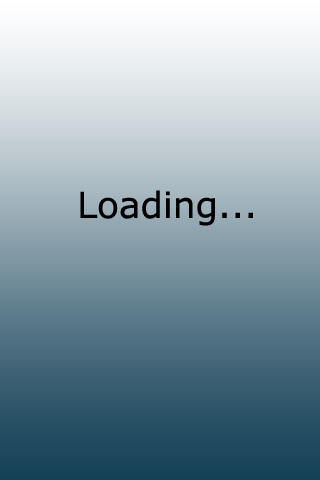
<style>
.page{position:relative;width:320px;height:480px}
.page>*{position:absolute;margin:0}
.t1{font:36px "Verdana";color:#000000}
</style>
<div class="page">
<p class="t1" style="left:80px;top:190px;width:173px;height:36px">Loading...</p>
</div>
